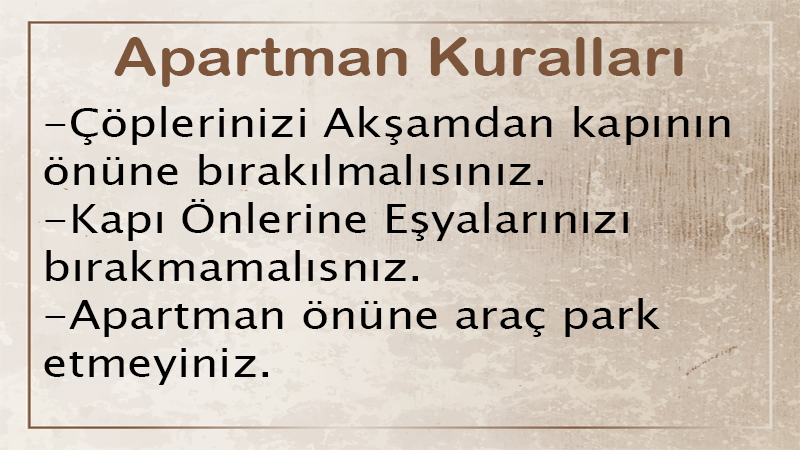
<style>
.page{position:relative;width:800px;height:450px}
.page>*{position:absolute;margin:0}
.t1{font:54px "ArialRoundedMTBold";color:#7c553b;scale:1.14 1}
.t2{font:40px "LucidaSansUnicode";color:#000000;scale:1.14 1}
</style>
<div class="page">
<p class="t1" style="left:114px;top:37px;width:569px;height:50px">Apartman Kuralları</p>
<p class="t2" style="left:44px;top:106px;width:686px;height:279px">-Çöplerinizi Akşamdan kapının önüne bırakılmalısınız.<br>-Kapı Önlerine Eşyalarınızı bırakmamalısnız.<br>-Apartman önüne araç park etmeyiniz.</p>
</div>
